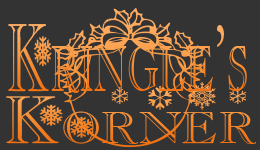
<style>
.page{position:relative;width:260px;height:150px;background:#333333}
.page>*{position:absolute;margin:0}
.t1{font:141.7px "Christmas3";color:#fba251;scale:1.12 1}
.t2{font:94.6px "Christmas";scale:0.58 1}
.t3{font:94.6px "AGaramondPro-Regular";scale:0.58 1}
.t4{font:65.9px "Flakes";scale:1.1 1}
</style>
<div class="page">
<p class="t1" style="left:54px;top:8px;width:152px;height:139px">g</p>
<p class="t2" style="left:8px;top:24px;width:239px;height:69px">Kringle<span class="t3">’</span>s</p>
<p class="t4" style="left:6px;top:82px;width:250px;height:62px">Korner</p>
</div>
